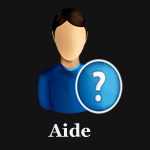
<style>
.page{position:relative;width:150px;height:150px;background:#121312}
.page>*{position:absolute;margin:0}
.t1{font:18px "Vani-Bold";color:#f2eff9}
</style>
<div class="page">
<p class="t1" style="left:48px;top:123px;width:43px;height:14px">Aide</p>
</div>
